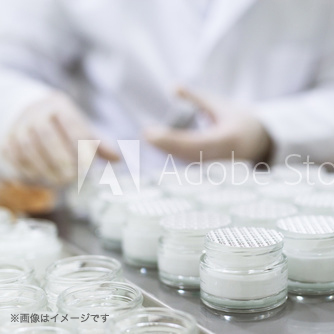
<style>
.page{position:relative;width:334px;height:334px}
.page>*{position:absolute;margin:0}
.t1{font:10px "HiraKakuPro-W3";color:#626262}
</style>
<div class="page">
<p class="t1" style="left:10px;top:313px;width:99px;height:10px">※画像はイメージです</p>
</div>
